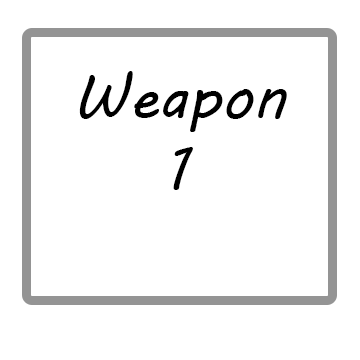
<style>
.page{position:relative;width:360px;height:360px;background:#ffffff}
.page>*{position:absolute;margin:0}
.t1{font:60px "MVBoli";color:#000000}
.t2{font:23.3px "MVBoli";color:#000000}
</style>
<div class="page">
<p class="t1" style="left:79px;top:71px;width:208px;height:119px;text-align:center"><span class="t2"><br></span>Weapon <br>1</p>
</div>
